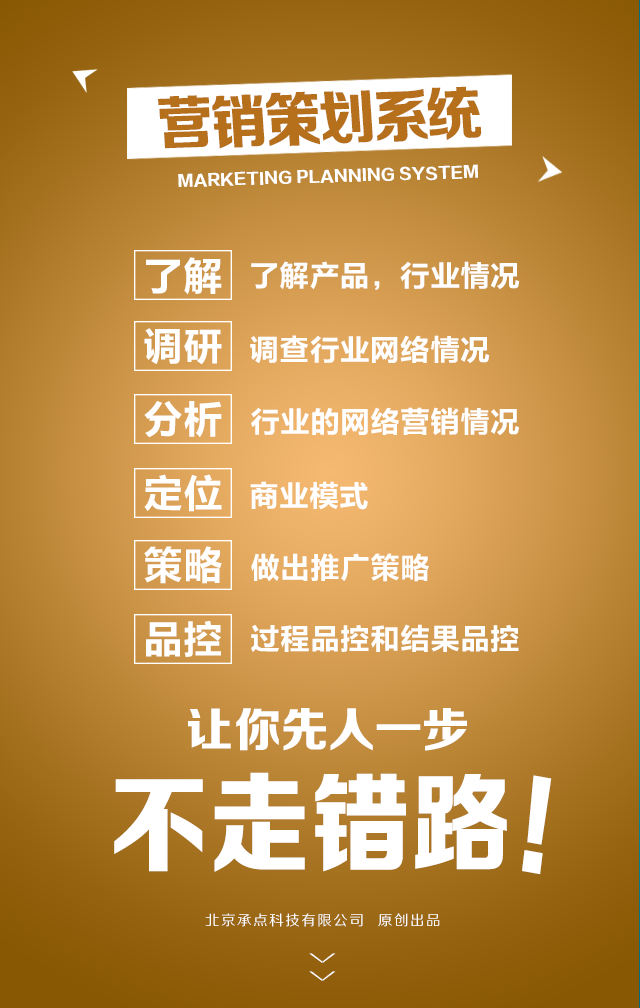
<style>
.page{position:relative;width:640px;height:1008px}
.page>*{position:absolute;margin:0}
.t1{font:58.6px "FZZDHJW--GB1-0";letter-spacing:-0.05em;color:#b6701b;text-transform:uppercase;scale:0.97 1}
.t2{font:15.6px "FZZDHJW--GB1-0";letter-spacing:0.005em;color:#ffffff;text-transform:uppercase}
.t3{font:40px "FZLTCHJW--GB1-0";color:#ffffff;text-transform:uppercase}
.t4{font:30px "FZLTCHK--GBK1-0";color:#fffefe;text-transform:uppercase}
.t5{font:30px "FZLTCHJW--GB1-0";color:#ffffff;text-transform:uppercase}
.t6{font:47.1px "FZZDHJW--GB1-0";letter-spacing:0.005em;color:#ffffff;text-transform:uppercase}
.t7{font:108.8px "FZZDHJW--GB1-0";letter-spacing:0.005em;color:#ffffff;text-transform:uppercase;scale:0.92 1}
.t8{font:113.8px "FZZDHJW--GB1-0";letter-spacing:0.005em;color:#ffffff;text-transform:uppercase;scale:0.83 1}
.t9{font:14.2px "FZZHJW--GB1-0";letter-spacing:0.1em;color:#ffffff;text-transform:uppercase}
.t10{font:36.8px "FZZXHJW--GB1-0";letter-spacing:0.5em;color:#ffffff;text-transform:uppercase;scale:0.44 1}
</style>
<div class="page">
<p class="t1" style="left:158px;top:86px;width:324px;height:63px;rotate:-2deg">营销策划系统</p>
<p class="t2" style="left:178px;top:164px;width:300px;height:23px;rotate:-2deg">Marketing planning system</p>
<p class="t3" style="left:146px;top:257px;width:76px;height:38px">了解</p>
<p class="t4" style="left:251px;top:261px;width:269px;height:29px">了解产品，行业情况</p>
<p class="t3" style="left:144px;top:328px;width:78px;height:37px">调研</p>
<p class="t5" style="left:250px;top:335px;width:240px;height:29px">调查行业网络情况</p>
<p class="t3" style="left:144px;top:401px;width:78px;height:37px">分析</p>
<p class="t5" style="left:251px;top:407px;width:268px;height:28px">行业的网络营销情况</p>
<p class="t3" style="left:144px;top:474px;width:78px;height:38px">定位</p>
<p class="t5" style="left:250px;top:481px;width:118px;height:29px">商业模式</p>
<p class="t3" style="left:144px;top:546px;width:78px;height:38px">策略</p>
<p class="t5" style="left:251px;top:553px;width:178px;height:29px">做出推广策略</p>
<p class="t3" style="left:146px;top:620px;width:75px;height:37px">品控</p>
<p class="t5" style="left:251px;top:624px;width:268px;height:28px">过程品控和结果品控</p>
<p class="t6" style="left:188px;top:708px;width:279px;height:43px">让你先人一步</p>
<p class="t7" style="left:114px;top:772px;width:393px;height:100px">不走错路</p>
<p class="t8" style="left:522px;top:775px;width:30px;height:100px;rotate:10deg">!</p>
<p class="t9" style="left:205px;top:913px;width:235px;height:14px">北京承点科技有限公司  原创出品</p>
<p class="t10" style="left:309px;top:953px;width:27px;height:28px;rotate:90deg">&gt;&gt;</p>
</div>
